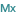
<style>
.page{position:relative;width:16px;height:16px;background:#ffffff}
.page>*{position:absolute;margin:0}
.t1{font:10.5px "Kalinga-Bold";color:#358b91}
</style>
<div class="page">
<p class="t1" style="left:0px;top:4px;width:16px;height:8px">Mx</p>
</div>
